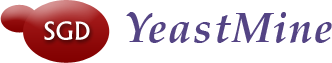
<style>
.page{position:relative;width:332px;height:63px;background:#ffffff}
.page>*{position:absolute;margin:0}
.t1{font:42px "PalatinoLinotype-BoldItalic";letter-spacing:0.04em;color:#544484}
</style>
<div class="page">
<p class="t1" style="left:126px;top:12px;width:206px;height:31px">YeastMine</p>
</div>
